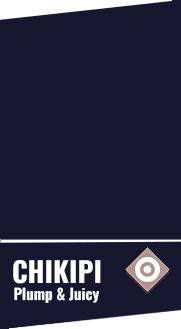
<style>
.page{position:relative;width:181px;height:329px;background:#181730}
.page>*{position:absolute;margin:0}
.t1{font:28px "Oswald-Bold";color:#ffffff}
.t2{font:15px "Oswald-Bold";color:#ffffff}
</style>
<div class="page">
<p class="t1" style="left:13px;top:260px;width:88px;height:24px">CHIKIPI</p>
<p class="t2" style="left:14px;top:287px;width:85px;height:16px">Plump &amp; Juicy</p>
</div>
